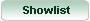
<style>
.page{position:relative;width:90px;height:21px}
.page>*{position:absolute;margin:0}
.t1{font:11px "Arial-BoldMT";color:#09381f}
</style>
<div class="page">
<p class="t1" style="left:23px;top:6px;width:47px;height:8px">Showlist</p>
</div>
